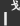
<style>
.page{position:relative;width:20px;height:26px;background:#333333}
.page>*{position:absolute;margin:0}
.t1{font:12px "DFKaiShu-SB-Estd-BF";color:#ececec;font-weight:bold}
.t2{font:18px "ArialMT";color:#ececec;font-weight:bold}
</style>
<div class="page">
<p class="t1" style="left:11px;top:0px;width:9px;height:11px">戈</p>
<p class="t2" style="left:4px;top:12px;width:3px;height:14px">I</p>
</div>
